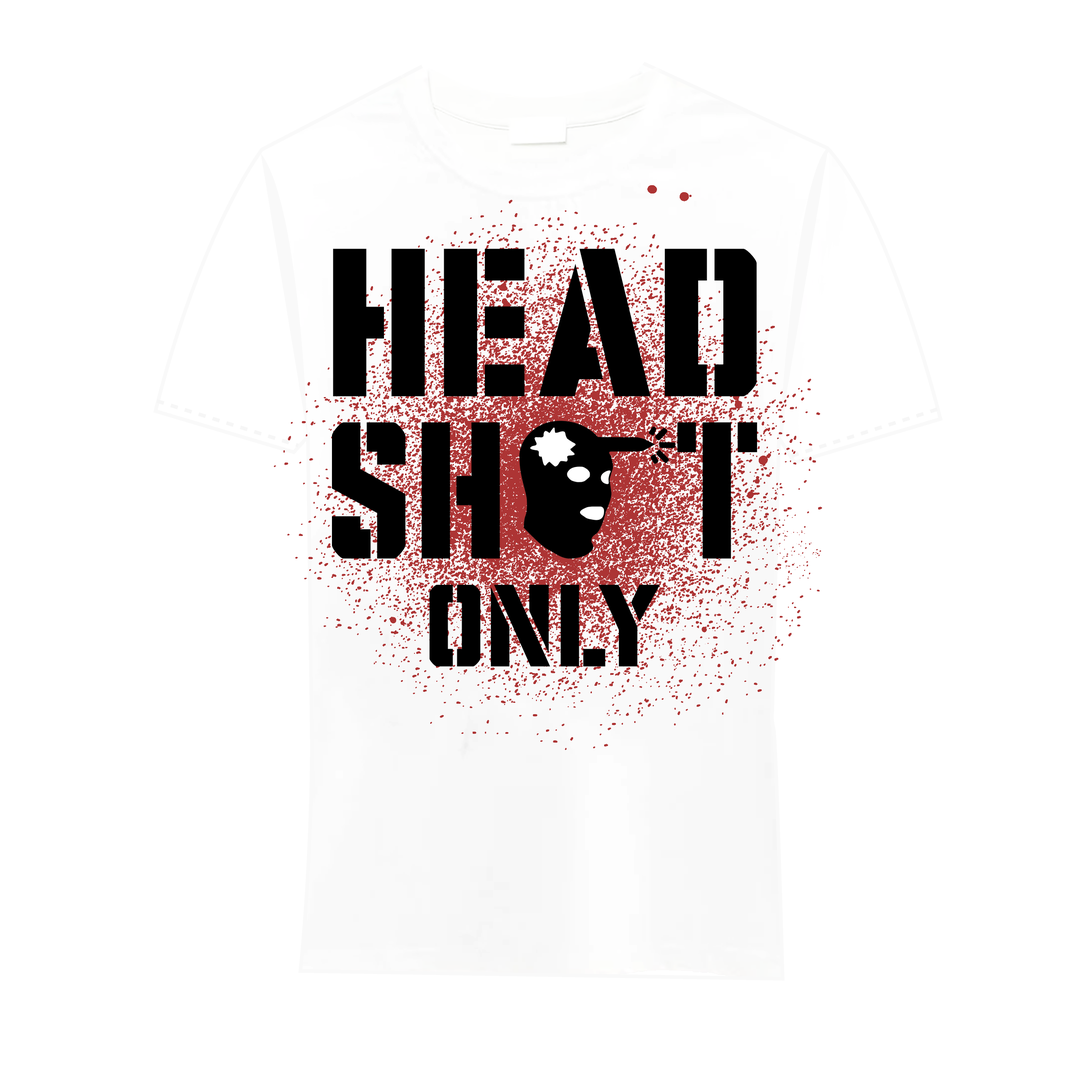
<style>
.page{position:relative;width:1092px;height:1092px;background:#ffffff}
.page>*{position:absolute;margin:0}
.t1{font:236.6px "CovertOpsCondensed";color:#000000;scale:1.16 1}
.t2{font:218.4px "CovertOpsCondensed";color:#000000;scale:1.07 1}
.t3{font:131px "CovertOpsCondensed";color:#000000;scale:1.16 1}
</style>
<div class="page">
<p class="t1" style="left:333px;top:249px;width:424px;height:148px">Head</p>
<p class="t2" style="left:332px;top:422px;width:425px;height:137px">Sh   t</p>
<p class="t3" style="left:429px;top:584px;width:231px;height:83px">only</p>
</div>
